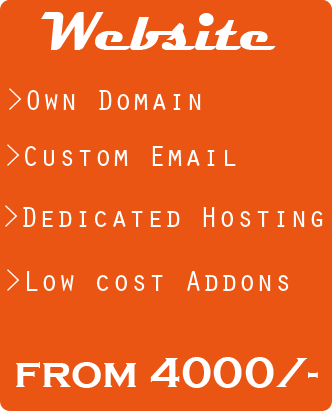
<style>
.page{position:relative;width:332px;height:411px;background:#eb5513}
.page>*{position:absolute;margin:0}
.t1{font:56px "Magneto-Bold";color:#ffffff}
.t2{font:30px "OratorStd";color:#ffffff}
.t3{font:44px "CopperplateGothic-Bold";color:#ffffff}
</style>
<div class="page">
<p class="t1" style="left:41px;top:12px;width:235px;height:38px">Website</p>
<p class="t2" style="left:9px;top:88px;width:192px;height:22px">&gt;Own Domain</p>
<p class="t2" style="left:7px;top:144px;width:229px;height:22px">&gt;Custom Email</p>
<p class="t2" style="left:5px;top:205px;width:318px;height:22px">&gt;Dedicated Hosting</p>
<p class="t2" style="left:7px;top:269px;width:282px;height:22px">&gt;Low cost Addons</p>
<p class="t3" style="left:16px;top:357px;width:302px;height:31px">from 4000/-</p>
</div>
